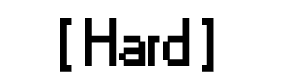
<style>
.page{position:relative;width:281px;height:82px;background:#ffffff}
.page>*{position:absolute;margin:0}
.t1{font:62.5px "Small Fonts";color:#000000;font-weight:bold}
</style>
<div class="page">
<p class="t1" style="left:60px;top:18px;width:154px;height:54px">[ Hard ]</p>
</div>
